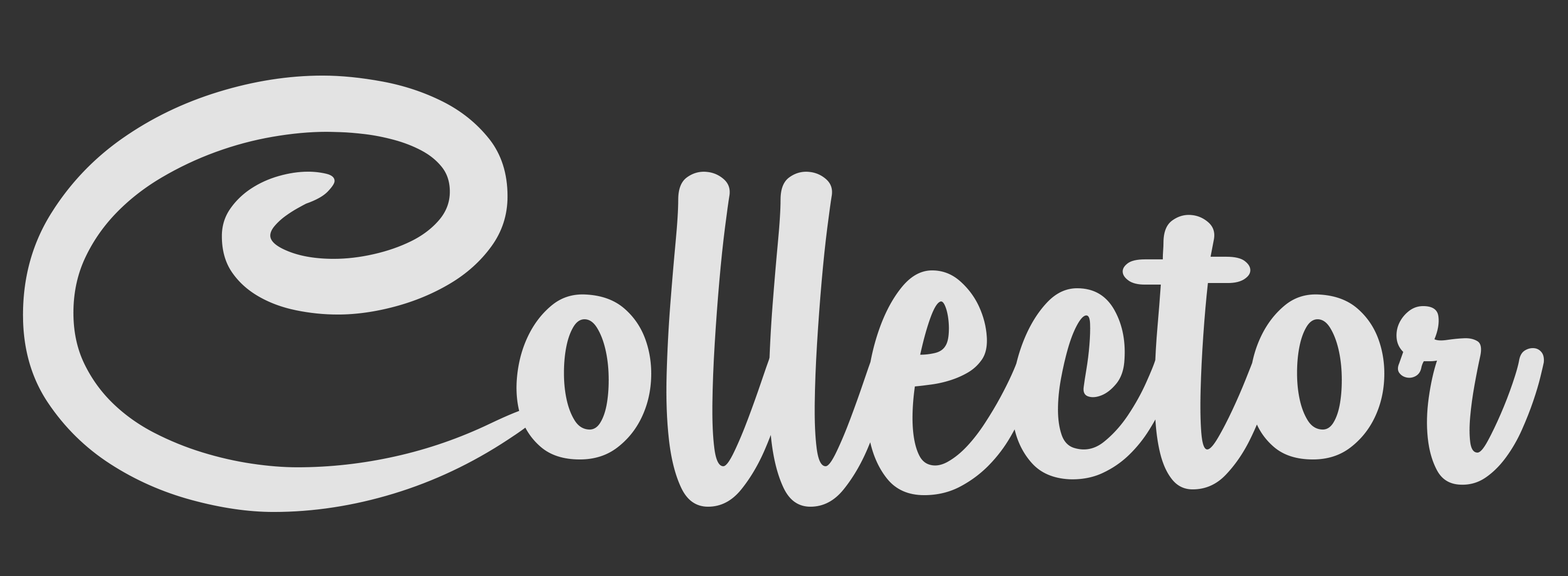
<style>
.page{position:relative;width:1568px;height:576px;background:#333333}
.page>*{position:absolute;margin:0}
.t1{font:662.8px "RemachineScriptPersonalUse";color:#e3e3e3}
</style>
<div class="page">
<p class="t1" style="left:23px;top:75px;width:1521px;height:437px">Collector</p>
</div>
